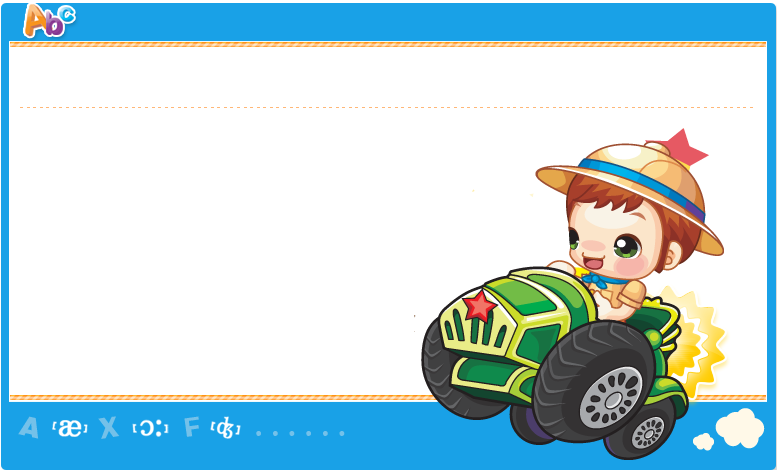
<style>
.page{position:relative;width:777px;height:470px;background:#ffffff}
.page>*{position:absolute;margin:0}
.t1{font:6px "DFYuan-Md-HK-BF";letter-spacing:0.05em;color:#ffb777}
.t2{font:26.9px "HelveticaLT-Black";letter-spacing:0.02em;color:#74c1e9}
.t3{font:25.8px "Addled";letter-spacing:0.02em;color:#74c1e9}
.t4{font:23.4px "Addled";letter-spacing:0.02em;color:#74c1e9}
</style>
<div class="page">
<p class="t1" style="left:20px;top:107px;width:733px;height:1px">_ _ _ _ _ _ _ _ _ _ _ _ _ _ _ _ _ _ _ _ _ _ _ _ _ _ _ _ _ _ _ _ _ _ _ _ _ _ _ _ _ _ _ _ _ _ _ _ _ _ _ _ _ _ _ _ _ _ _ _ _ _ _ _ _ _ _ _ _ _ _ _ _ _ _ _ _ _ _ _ _ _ _ _ _ _ _ _ _ _ _ _ _ _ _ _ _ _ _ _ _ _ _ _ _ _ _ _ _ _ _ _ _ _ _ _ _ _ _ _ _ _ _ _ _ _ _ _ _ _ _ _</p>
<p class="t2" style="left:18px;top:416px;width:21px;height:23px;rotate:13deg">A</p>
<p class="t3" style="left:98px;top:416px;width:22px;height:23px;rotate:-9deg">X</p>
<p class="t4" style="left:184px;top:416px;width:15px;height:21px;rotate:-8deg">F</p>
<p class="t4" style="left:256px;top:431px;width:89px;height:5px">. . . . . .</p>
</div>
